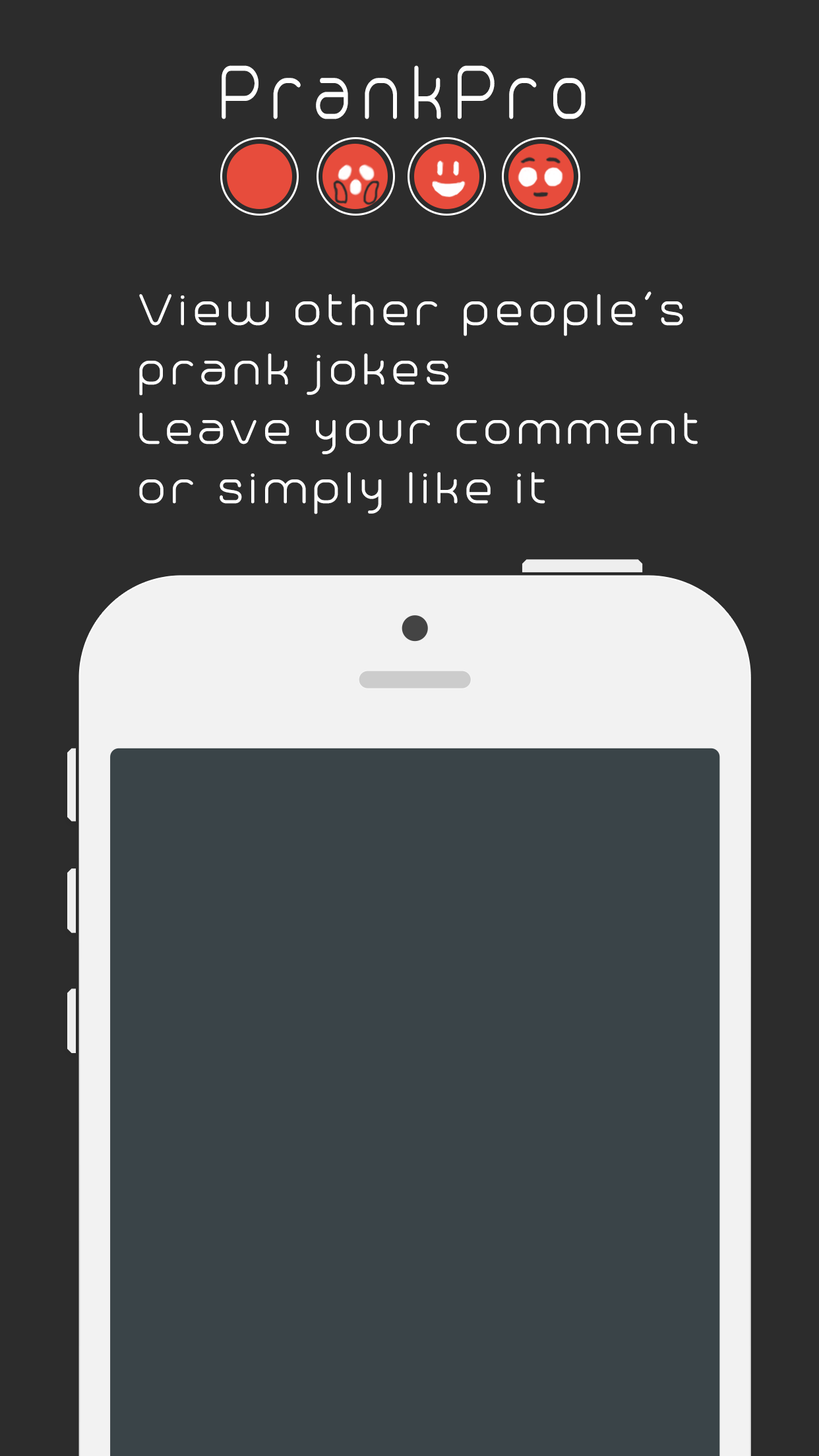
<style>
.page{position:relative;width:819px;height:1456px;background:#2c2c2c}
.page>*{position:absolute;margin:0}
.t1{font:90.5px "Trench-Thin";letter-spacing:0.14em;color:#ffffff;font-weight:bold;scale:0.78 1}
.t2{font:52.8px/59.3px "Trench-Thin";letter-spacing:0.08em;color:#ffffff;font-weight:bold}
</style>
<div class="page">
<p class="t1" style="left:222px;top:65px;width:364px;height:54px">PrankPro</p>
<p class="t2" style="left:139px;top:291px;width:559px;height:223px">View other people’s<br>prank jokes <br>Leave your comment<br>or simply like it</p>
</div>
